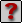
<style>
.page{position:relative;width:22px;height:23px;background:#cacaca}
.page>*{position:absolute;margin:0}
.t1{font:20px "BellGothicStd-Bold";color:#a20000;font-weight:bold;scale:1.5 1}
</style>
<div class="page">
<p class="t1" style="left:5px;top:3px;width:13px;height:16px;rotate:1deg">?</p>
</div>
